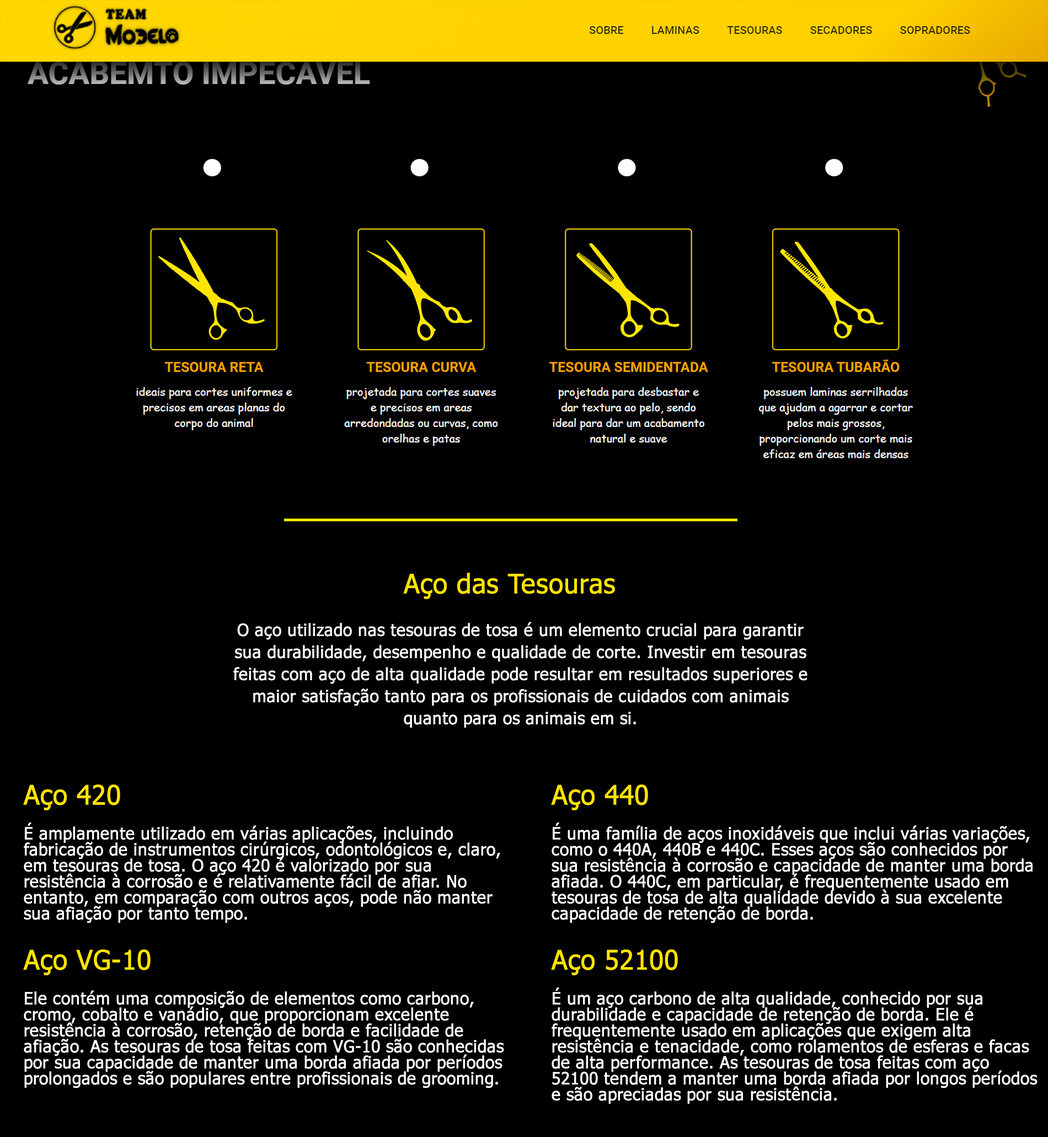
<style>
.page{position:relative;width:1048px;height:1137px;background:#000000}
.page>*{position:absolute;margin:0}
.t1{font:26.8px "Tahoma";color:#ffe400;font-weight:bold}
.t2{font:16.7px/22.1px "Tahoma";color:#ffffff;font-weight:bold}
.t3{font:16.7px/16px "Tahoma";color:#ffffff;font-weight:bold}
</style>
<div class="page">
<p class="t1" style="left:403px;top:573px;width:212px;height:26px">Aço das Tesouras</p>
<p class="t2" style="left:233px;top:622px;width:575px;height:106px;text-align:center">O aço utilizado nas tesouras de tosa é um elemento crucial para garantir sua durabilidade, desempenho e qualidade de corte. Investir em tesouras feitas com aço de alta qualidade pode resultar em resultados superiores e maior satisfação tanto para os profissionais de cuidados com animais quanto para os animais em si.</p>
<p class="t1" style="left:23px;top:785px;width:97px;height:26px">Aço 420</p>
<p class="t1" style="left:551px;top:785px;width:97px;height:26px">Aço 440</p>
<p class="t3" style="left:24px;top:823px;width:477px;height:100px">É amplamente utilizado em várias aplicações, incluindo fabricação de instrumentos cirúrgicos, odontológicos e, claro, em tesouras de tosa. O aço 420 é valorizado por sua resistência à corrosão e é relativamente fácil de afiar. No entanto, em comparação com outros aços, pode não manter sua afiação por tanto tempo.</p>
<p class="t3" style="left:552px;top:823px;width:481px;height:100px">É uma família de aços inoxidáveis que inclui várias variações, como o 440A, 440B e 440C. Esses aços são conhecidos por sua resistência à corrosão e capacidade de manter uma borda afiada. O 440C, em particular, é frequentemente usado em tesouras de tosa de alta qualidade devido à sua excelente capacidade de retenção de borda.</p>
<p class="t1" style="left:23px;top:950px;width:128px;height:26px">Aço VG-10</p>
<p class="t1" style="left:551px;top:950px;width:127px;height:26px">Aço 52100</p>
<p class="t3" style="left:552px;top:988px;width:486px;height:116px">É um aço carbono de alta qualidade, conhecido por sua durabilidade e capacidade de retenção de borda. Ele é frequentemente usado em aplicações que exigem alta resistência e tenacidade, como rolamentos de esferas e facas de alta performance. As tesouras de tosa feitas com aço 52100 tendem a manter uma borda afiada por longos períodos e são apreciadas por sua resistência.</p>
<p class="t3" style="left:24px;top:991px;width:480px;height:97px">Ele contém uma composição de elementos como carbono, cromo, cobalto e vanádio, que proporcionam excelente resistência à corrosão, retenção de borda e facilidade de afiação. As tesouras de tosa feitas com VG-10 são conhecidas por sua capacidade de manter uma borda afiada por períodos prolongados e são populares entre profissionais de grooming.</p>
</div>
